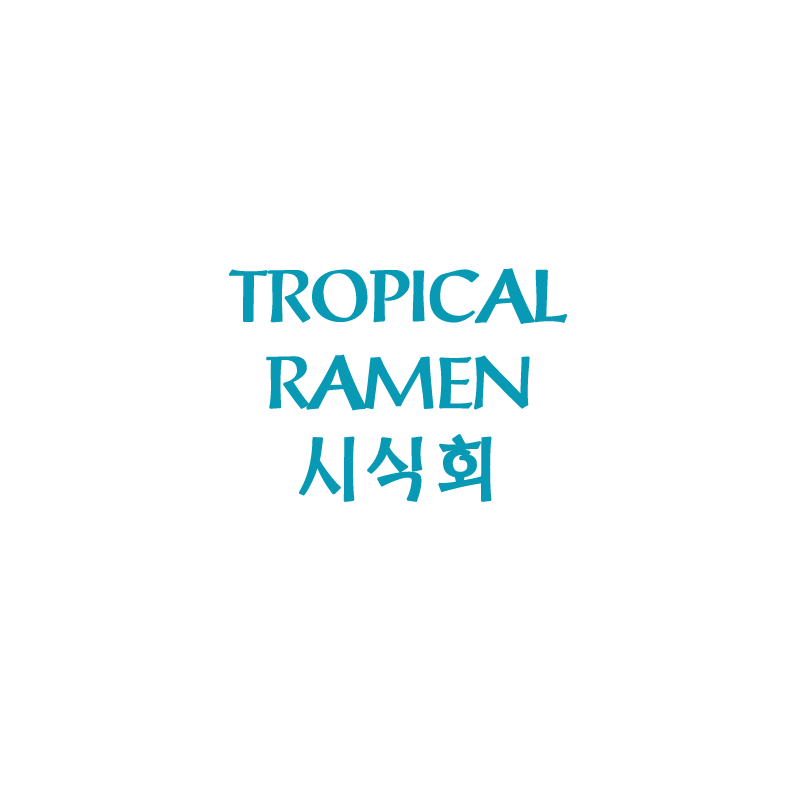
<style>
.page{position:relative;width:800px;height:800px;background:#ffffff}
.page>*{position:absolute;margin:0}
.t1{font:72px "TSTNamr";letter-spacing:-0.085em;color:#089ab4;font-weight:bold}
</style>
<div class="page">
<p class="t1" style="left:228px;top:268px;width:340px;height:234px;text-align:center">TROPICAL<br>RAMEN <br>시식회</p>
</div>
